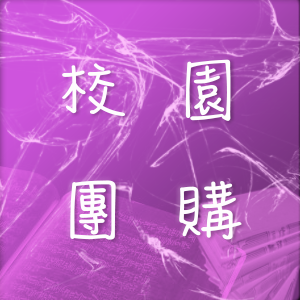
<style>
.page{position:relative;width:300px;height:300px}
.page>*{position:absolute;margin:0}
.t1{font:105px "DFYun-W3-WINP-BF";letter-spacing:0.1em;color:#fefdfe}
</style>
<div class="page">
<p class="t1" style="left:62px;top:59px;width:180px;height:181px">校園<br>團購</p>
</div>
